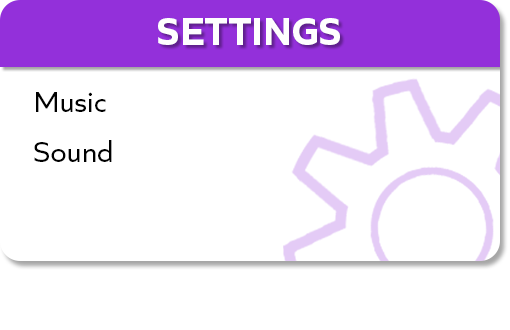
<style>
.page{position:relative;width:510px;height:330px;background:#ffffff}
.page>*{position:absolute;margin:0}
.t1{font:40px "QuietSans-Bold";color:#fefefe}
.t2{font:30px "QuietSans-Regular";color:#000000}
</style>
<div class="page">
<p class="t1" style="left:158px;top:18px;width:182px;height:27px">SETTINGS</p>
<p class="t2" style="left:36px;top:92px;width:70px;height:20px">Music</p>
<p class="t2" style="left:34px;top:140px;width:78px;height:22px">Sound</p>
</div>
